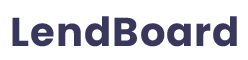
<style>
.page{position:relative;width:248px;height:60px;background:#ffffff}
.page>*{position:absolute;margin:0}
.t1{font:40.1px "Poppins-Bold";letter-spacing:0.025em;color:#39375c}
</style>
<div class="page">
<p class="t1" style="left:12px;top:16px;width:225px;height:31px">LendBoard</p>
</div>
